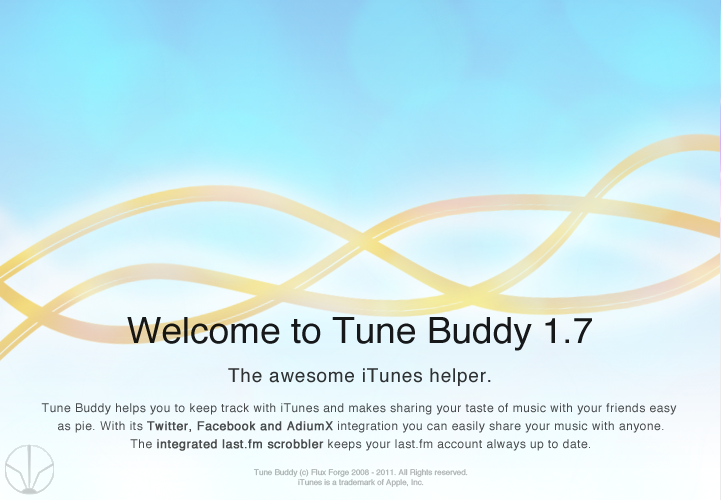
<style>
.page{position:relative;width:721px;height:500px}
.page>*{position:absolute;margin:0}
.t1{font:36px "Helvetica";color:#171819}
.t2{font:19px "Helvetica";letter-spacing:0.04em;color:#2e3233}
.t3{font:12px/18px "Helvetica";letter-spacing:0.04em;color:#484b4c}
.t4{font:12px/18px "Helvetica";letter-spacing:0.04em;color:#484b4c;font-weight:bold}
.t5{font:8px "Helvetica"}
</style>
<div class="page">
<p class="t1" style="left:127px;top:317px;width:465px;height:34px">Welcome to Tune Buddy 1.7</p>
<p class="t2" style="left:228px;top:368px;width:263px;height:18px">The awesome iTunes helper.</p>
<p class="t3" style="left:41px;top:403px;width:636px;height:48px;text-align:center">Tune Buddy helps you to keep track with iTunes and makes sharing your taste of music with your friends easy <br>as pie. With its <span class="t4">Twitter, Facebook and AdiumX</span> integration you can easily share your music with anyone.<br>The <span class="t4">integrated last.fm scrobbler</span> keeps your last.fm account always up to date.</p>
<p class="t5" style="left:253px;top:469px;width:215px;height:18px;text-align:center">Tune Buddy (c) Flux Forge 2008 - 2011. All Rights reserved.<br>iTunes is a trademark of Apple, Inc.</p>
</div>
